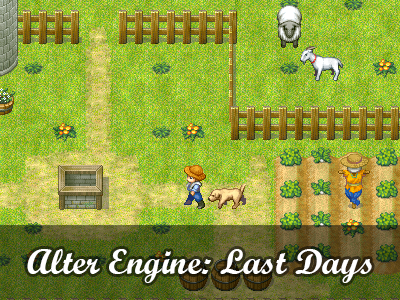
<style>
.page{position:relative;width:400px;height:300px}
.page>*{position:absolute;margin:0}
.t1{font:36px "ScriptMTBold";color:#ffffff}
</style>
<div class="page">
<p class="t1" style="left:27px;top:249px;width:345px;height:34px">Alter Engine: Last Days</p>
</div>
